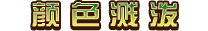
<style>
.page{position:relative;width:208px;height:31px;background:#ffffff}
.page>*{position:absolute;margin:0}
.t1{font:27px "JZhongYi";letter-spacing:0.3em;scale:1.11 1}
</style>
<div class="page">
<p class="t1" style="left:32px;top:2px;width:145px;height:25px">颜色溅泼</p>
</div>
